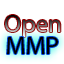
<style>
.page{position:relative;width:64px;height:64px;background:#ffffff}
.page>*{position:absolute;margin:0}
.t1{font:25px "MyriadPro-Regular"}
.t2{font:25px "MyriadPro-Regular";color:#000000}
</style>
<div class="page">
<p class="t1" style="left:5px;top:15px;width:56px;height:22px">Open</p>
<p class="t2" style="left:7px;top:37px;width:51px;height:17px">MMP</p>
</div>
